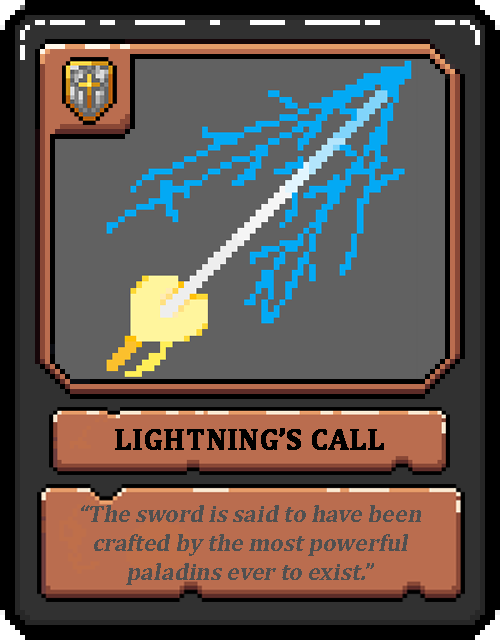
<style>
.page{position:relative;width:500px;height:640px;background:#616161}
.page>*{position:absolute;margin:0}
.t1{font:30px "Cambria-Bold";color:#000000;text-transform:uppercase;font-weight:bold}
.t2{font:24px "Cambria-Bold";color:#505050;font-style:italic}
</style>
<div class="page">
<p class="t1" style="left:115px;top:428px;width:269px;height:22px">Lightning’s Call</p>
<p class="t2" style="left:81px;top:505px;width:340px;height:80px;text-align:center">“The sword is said to have been crafted by the most powerful paladins ever to exist.”</p>
</div>
